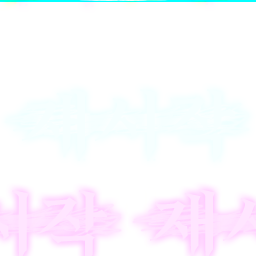
<style>
.page{position:relative;width:256px;height:256px;background:#ffffff}
.page>*{position:absolute;margin:0}
.t1{font:72px "HeirofLightBold";color:#ffffff}
</style>
<div class="page">
<p class="t1" style="left:22px;top:87px;width:214px;height:73px">재시작</p>
</div>
